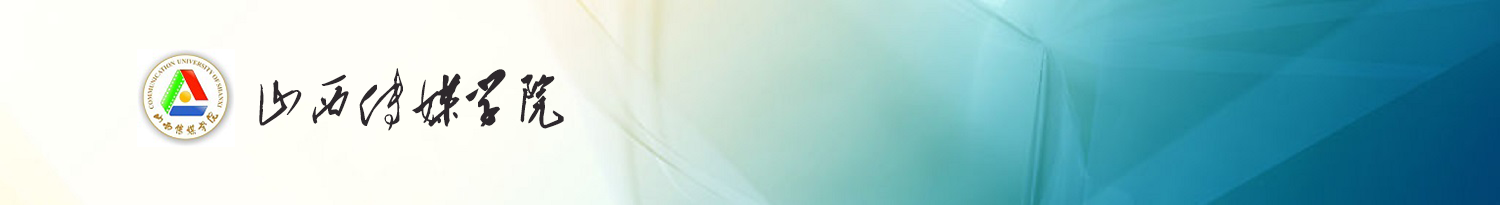
<style>
.page{position:relative;width:1500px;height:205px}
.page>*{position:absolute;margin:0}
.t1{font:56.2px "²ÝÌ´Õ«Ã«Ôó¶«×ÖÌå";letter-spacing:0.1em;color:#2d282c;scale:0.85 1}
</style>
<div class="page">
<p class="t1" style="left:259px;top:68px;width:305px;height:63px">山西传媒学院</p>
</div>
